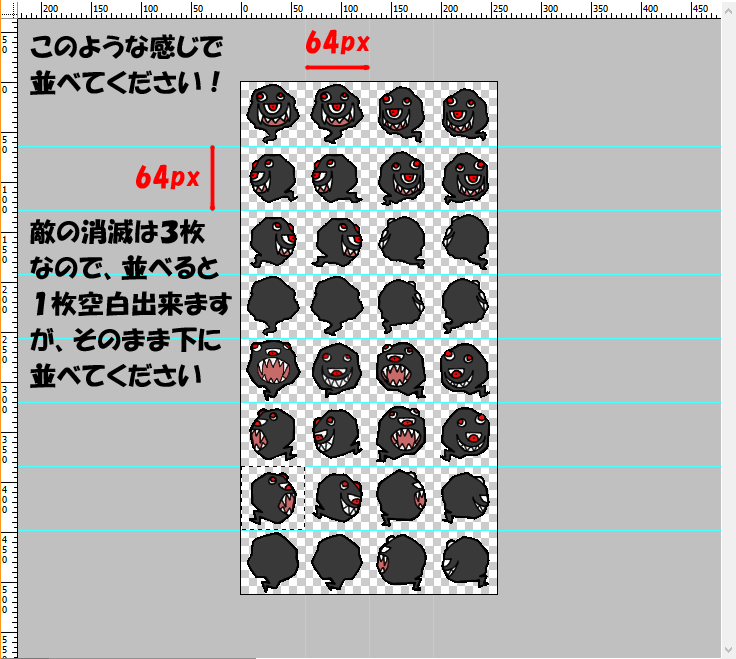
<style>
.page{position:relative;width:736px;height:659px;background:#c0c0c0}
.page>*{position:absolute;margin:0}
.t1{font:26px "HGPSoeiKakupoptai";letter-spacing:0.025em;color:#ff0000}
.t2{font:26px/36px "HGPSoeiKakupoptai";letter-spacing:0.025em;color:#010101}
.t3{font:26px/36px "HGPSoeiKakupoptai";letter-spacing:0.025em;color:#000000}
</style>
<div class="page">
<p class="t1" style="left:306px;top:29px;width:64px;height:26px">64px</p>
<p class="t2" style="left:30px;top:34px;width:193px;height:61px">このような感じで<br>並べてください！</p>
<p class="t1" style="left:136px;top:164px;width:64px;height:26px">64px</p>
<p class="t3" style="left:30px;top:219px;width:202px;height:169px">敵の消滅は３枚<br>なので、並べると<br>１枚空白出来ます<br>が、そのまま下に<br>並べてください</p>
</div>
